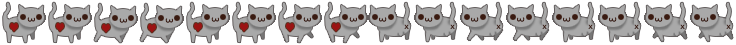
<style>
.page{position:relative;width:736px;height:45px;background:#ffffff}
.page>*{position:absolute;margin:0}
.t1{font:10.5px "MyriadPro-Regular";color:#3a1b11}
.t2{font:8.1px "MyriadPro-Regular";color:#3a1b11;scale:1.11 1}
</style>
<div class="page">
<p class="t1" style="left:27px;top:17px;width:8px;height:5px;rotate:90deg">3</p>
<p class="t1" style="left:73px;top:17px;width:8px;height:5px;rotate:90deg">3</p>
<p class="t1" style="left:211px;top:17px;width:8px;height:5px;rotate:90deg">3</p>
<p class="t1" style="left:257px;top:17px;width:8px;height:5px;rotate:90deg">3</p>
<p class="t1" style="left:303px;top:17px;width:8px;height:5px;rotate:90deg">3</p>
<p class="t1" style="left:349px;top:17px;width:8px;height:5px;rotate:90deg">3</p>
<p class="t1" style="left:379px;top:17px;width:8px;height:5px;rotate:90deg">3</p>
<p class="t1" style="left:425px;top:17px;width:8px;height:5px;rotate:90deg">3</p>
<p class="t1" style="left:471px;top:17px;width:8px;height:5px;rotate:90deg">3</p>
<p class="t1" style="left:517px;top:17px;width:8px;height:5px;rotate:90deg">3</p>
<p class="t1" style="left:563px;top:17px;width:8px;height:5px;rotate:90deg">3</p>
<p class="t1" style="left:609px;top:17px;width:8px;height:5px;rotate:90deg">3</p>
<p class="t1" style="left:655px;top:17px;width:8px;height:5px;rotate:90deg">3</p>
<p class="t1" style="left:701px;top:17px;width:8px;height:5px;rotate:90deg">3</p>
<p class="t1" style="left:119px;top:18px;width:8px;height:5px;rotate:90deg">3</p>
<p class="t1" style="left:165px;top:18px;width:8px;height:5px;rotate:90deg">3</p>
<p class="t2" style="left:404px;top:24px;width:5px;height:5px">x</p>
<p class="t2" style="left:450px;top:24px;width:5px;height:5px">x</p>
<p class="t2" style="left:496px;top:24px;width:5px;height:5px">x</p>
<p class="t2" style="left:542px;top:24px;width:5px;height:5px">x</p>
<p class="t2" style="left:588px;top:24px;width:5px;height:5px">x</p>
<p class="t2" style="left:634px;top:24px;width:5px;height:5px">x</p>
<p class="t2" style="left:680px;top:24px;width:5px;height:5px">x</p>
<p class="t2" style="left:726px;top:24px;width:5px;height:5px">x</p>
</div>
